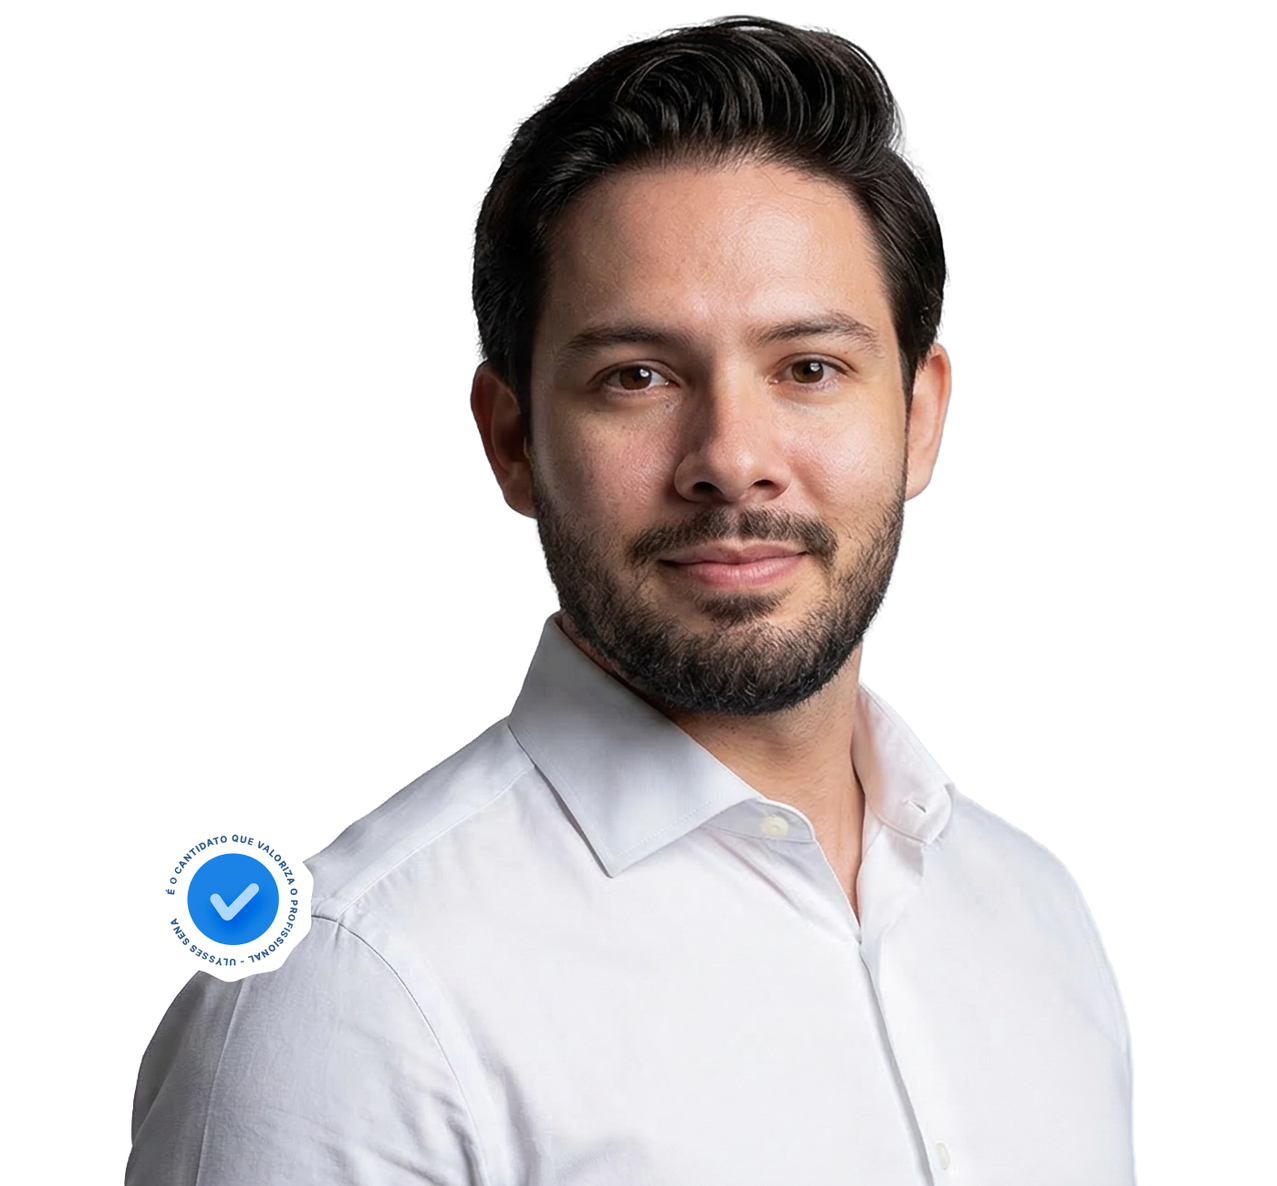
<style>
.page{position:relative;width:1277px;height:1186px;background:#ffffff}
.page>*{position:absolute;margin:0}
.t1{font:9px "Inter-Bold";letter-spacing:0.08em;color:#275d90;text-transform:uppercase;font-weight:bold}
</style>
<div class="page">
<p class="t1" style="left:165px;top:834px;width:133px;height:132px;rotate:-41deg">é o cantidato que valoriza o profissional - ulysses sena</p>
</div>
